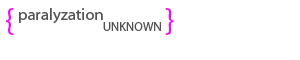
<style>
.page{position:relative;width:300px;height:60px;background:#ffffff}
.page>*{position:absolute;margin:0}
.t1{font:33.3px "MyriadPro-Regular";color:#f30df6}
.t2{font:16.7px "MyriadPro-Regular";color:#525252}
.t3{font:12.5px "MyriadPro-Regular";color:#525252}
</style>
<div class="page">
<p class="t1" style="left:6px;top:8px;width:8px;height:27px">{</p>
<p class="t2" style="left:19px;top:8px;width:84px;height:16px">paralyzation</p>
<p class="t1" style="left:165px;top:8px;width:9px;height:27px">}</p>
<p class="t3" style="left:103px;top:22px;width:58px;height:9px">UNKNOWN</p>
</div>
